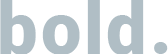
<style>
.page{position:relative;width:168px;height:54px;background:#ffffff}
.page>*{position:absolute;margin:0}
.t1{font:72px "Roboto-Black";letter-spacing:0.04em;color:#b0bec5}
</style>
<div class="page">
<p class="t1" style="left:0px;top:0px;width:168px;height:55px">bold.</p>
</div>
